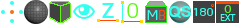
<style>
.page{position:relative;width:240px;height:24px;background:#ffffff}
.page>*{position:absolute;margin:0}
.t1{font:31.7px "QuestaSans-Regular";color:#37ffed}
.t2{font:22.1px "3ds-Light";color:#63f713}
.t3{font:16px "ArialRoundedMTBold";color:#37ffed}
.t4{font:12.1px "3ds-Light";color:#63f713}
.t5{font:13.8px "3ds-Light";color:#37ffed}
.t6{font:13.8px "3ds-Light";color:#ff4a03}
.t7{font:11.7px "3ds-Light";color:#37ffed}
.t8{font:9.4px "3ds-Light";color:#37ffed}
</style>
<div class="page">
<p class="t1" style="left:102px;top:3px;width:12px;height:15px">z</p>
<p class="t2" style="left:127px;top:3px;width:11px;height:15px">0</p>
<p class="t3" style="left:168px;top:6px;width:23px;height:12px">QS</p>
<p class="t4" style="left:224px;top:5px;width:7px;height:8px">0</p>
<p class="t5" style="left:147px;top:10px;width:11px;height:10px">M</p>
<p class="t6" style="left:159px;top:10px;width:7px;height:10px">B</p>
<p class="t7" style="left:193px;top:8px;width:20px;height:8px">180</p>
<p class="t8" style="left:220px;top:14px;width:16px;height:7px">EXT</p>
</div>
